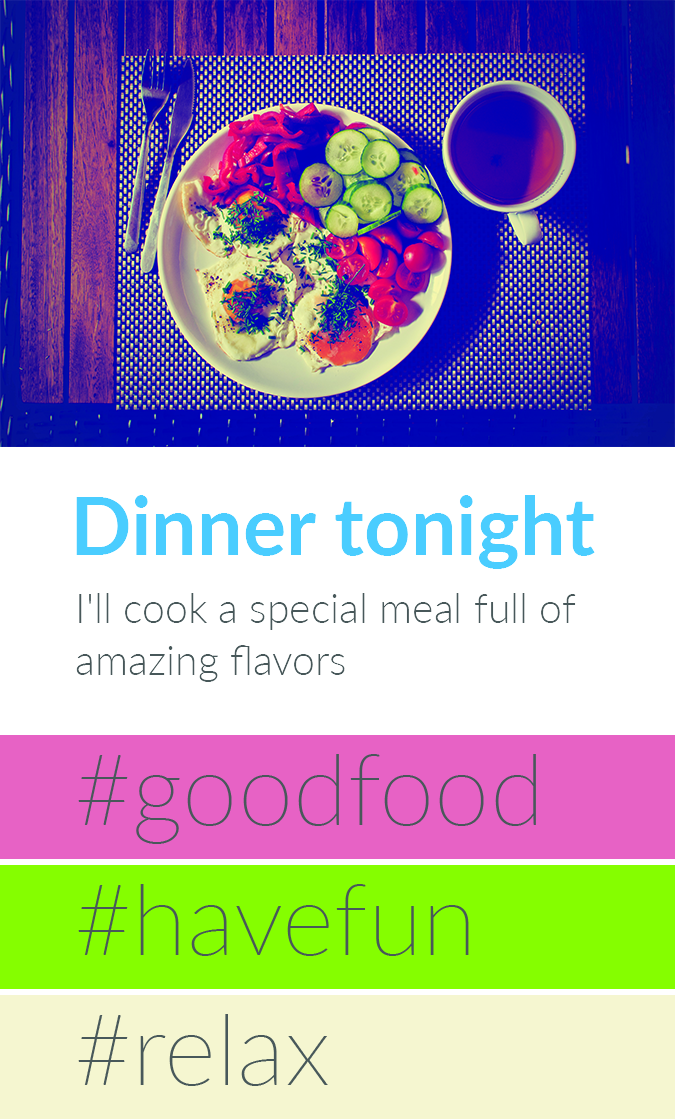
<style>
.page{position:relative;width:675px;height:1119px;background:#ffffff}
.page>*{position:absolute;margin:0}
.t1{font:81px "Lato-Bold";color:#4acdff}
.t2{font:41px/52px "Lato-Light";color:#48585a}
</style>
<div class="page">
<p class="t1" style="left:76px;top:495px;width:519px;height:74px">Dinner tonight</p>
<p class="t2" style="left:76px;top:593px;width:500px;height:89px;text-align:right">I'll cook a special meal full of amazing flavors</p>
</div>
